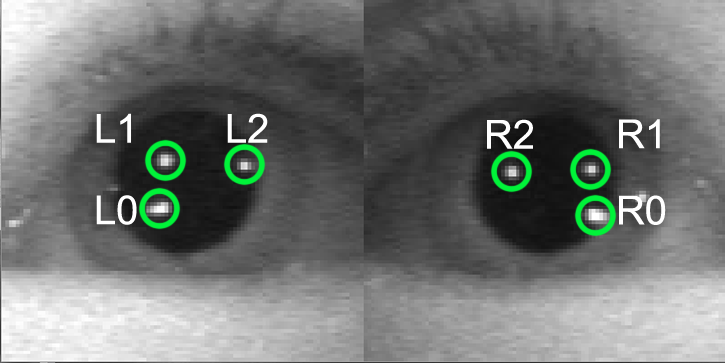
<style>
.page{position:relative;width:725px;height:363px}
.page>*{position:absolute;margin:0}
.t1{font:40px "ArialMT";letter-spacing:-0.005em;color:#ffffff}
</style>
<div class="page">
<p class="t1" style="left:96px;top:113px;width:35px;height:30px">L1</p>
<p class="t1" style="left:227px;top:113px;width:41px;height:30px">L2</p>
<p class="t1" style="left:487px;top:119px;width:46px;height:30px">R2</p>
<p class="t1" style="left:619px;top:119px;width:41px;height:30px">R1</p>
<p class="t1" style="left:96px;top:195px;width:41px;height:30px">L0</p>
<p class="t1" style="left:619px;top:195px;width:47px;height:30px">R0</p>
</div>
